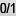
<style>
.page{position:relative;width:16px;height:16px}
.page>*{position:absolute;margin:0}
.t1{font:12.5px "ArialMT";color:#000000;scale:0.93 1}
</style>
<div class="page">
<p class="t1" style="left:0px;top:3px;width:15px;height:10px">0/1</p>
<p class="t1" style="left:0px;top:3px;width:15px;height:10px">0/1</p>
</div>
